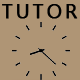
<style>
.page{position:relative;width:80px;height:80px;background:#af9575}
.page>*{position:absolute;margin:0}
.t1{font:20px "Ebrima";letter-spacing:0.14em;color:#000000;font-weight:bold}
</style>
<div class="page">
<p class="t1" style="left:2px;top:4px;width:76px;height:15px">TUTOR</p>
</div>
